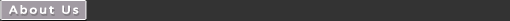
<style>
.page{position:relative;width:510px;height:21px;background:#333333}
.page>*{position:absolute;margin:0}
.t1{font:12px "Calibri";letter-spacing:0.1em;color:#ffffff;font-weight:bold;scale:1.25 1}
</style>
<div class="page">
<p class="t1" style="left:9px;top:5px;width:70px;height:9px">About Us</p>
</div>
